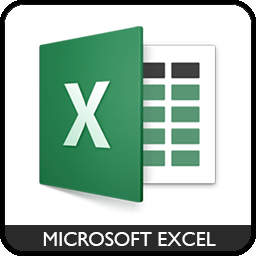
<style>
.page{position:relative;width:256px;height:256px;background:#ffffff}
.page>*{position:absolute;margin:0}
.t1{font:20px "GillSansMT";color:#ffffff}
</style>
<div class="page">
<p class="t1" style="left:43px;top:232px;width:173px;height:14px">MICROSOFT EXCEL</p>
</div>
